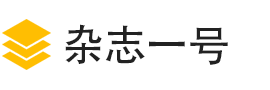
<style>
.page{position:relative;width:270px;height:90px;background:#ffffff}
.page>*{position:absolute;margin:0}
.t1{font:42px "AdobeHeitiStd-Regular";color:#222222}
</style>
<div class="page">
<p class="t1" style="left:65px;top:24px;width:163px;height:41px">杂志一号</p>
</div>
